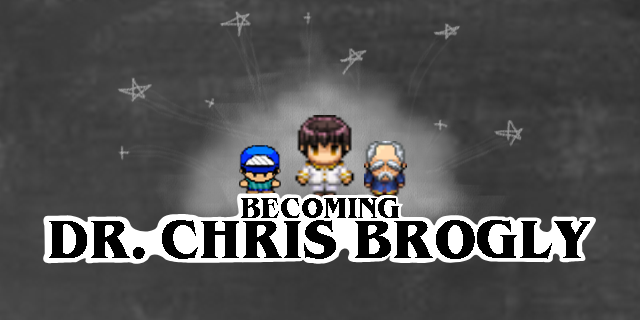
<style>
.page{position:relative;width:640px;height:320px}
.page>*{position:absolute;margin:0}
.t1{font:26.2px "BenguiatBold";color:#000000;scale:0.94 1}
.t2{font:49.2px "BenguiatBold";color:#000000;scale:0.94 1}
</style>
<div class="page">
<p class="t1" style="left:241px;top:198px;width:158px;height:20px">BECOMING</p>
<p class="t2" style="left:49px;top:220px;width:541px;height:39px">DR. CHRIS BROGLY</p>
</div>
